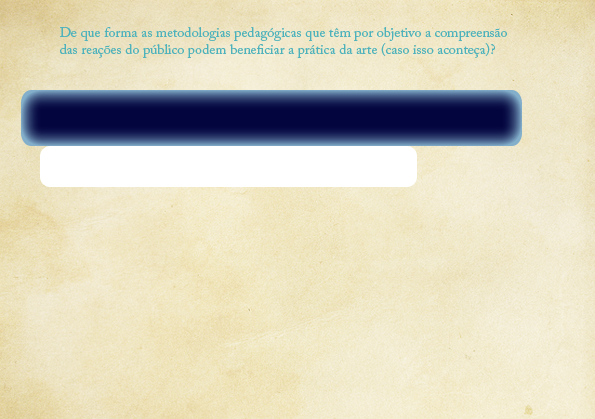
<style>
.page{position:relative;width:595px;height:419px}
.page>*{position:absolute;margin:0}
.t1{font:14px "ACaslonPro-Regular";color:#4db2bb}
</style>
<div class="page">
<p class="t1" style="left:59px;top:27px;width:448px;height:31px">De que forma as metodologias pedagógicas que têm por objetivo a compreensão <br>das reações do público podem beneficiar a prática da arte (caso isso aconteça)?</p>
</div>
